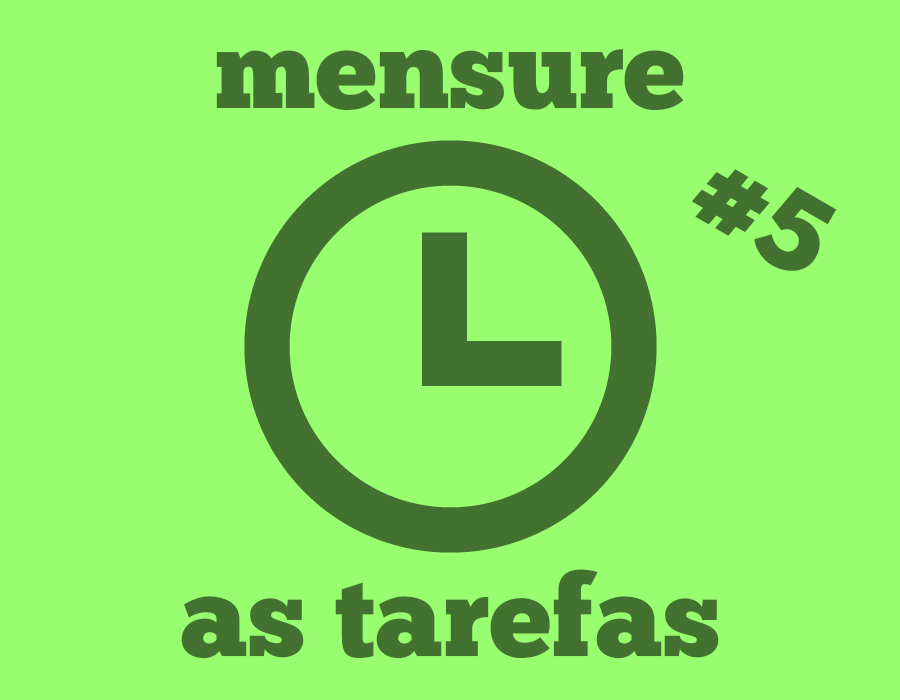
<style>
.page{position:relative;width:900px;height:700px;background:#98fd6f}
.page>*{position:absolute;margin:0}
.t1{font:112px "ChunkFive-Roman";color:#437230}
.t2{font:112.6px "ChunkFive-Roman";color:#437230}
</style>
<div class="page">
<p class="t1" style="left:216px;top:49px;width:468px;height:62px">mensure</p>
<p class="t2" style="left:692px;top:169px;width:145px;height:102px;rotate:30deg">#5</p>
<p class="t2" style="left:181px;top:569px;width:538px;height:90px">as tarefas</p>
</div>
